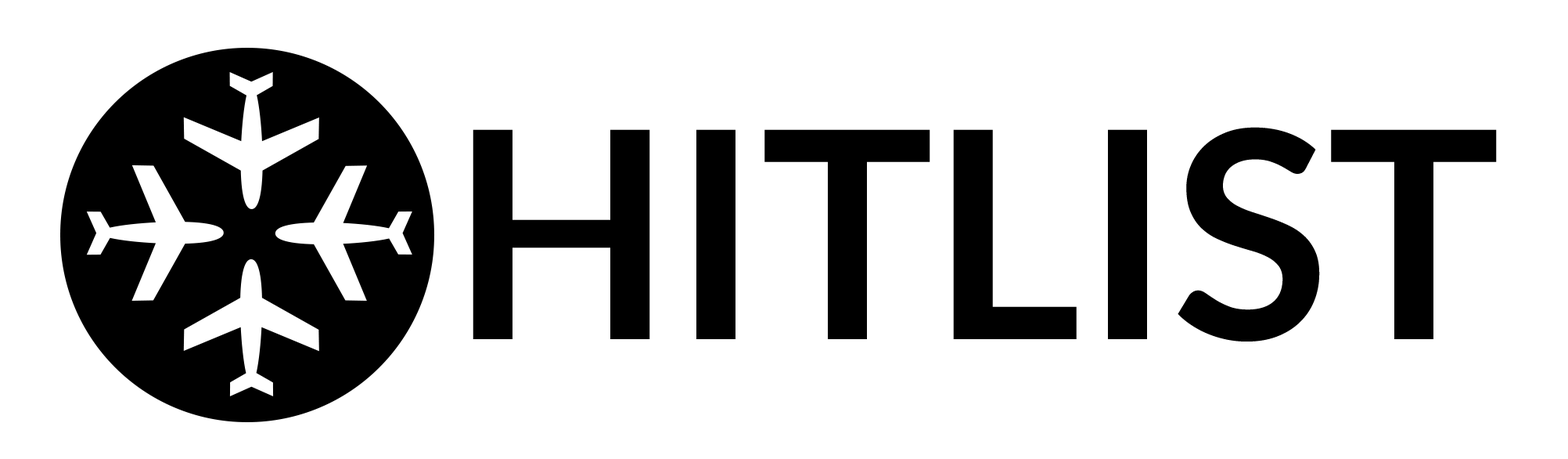
<style>
.page{position:relative;width:1568px;height:459px;background:#ffffff}
.page>*{position:absolute;margin:0}
.t1{font:289.1px "Lato-Bold";color:#000000}
</style>
<div class="page">
<p class="t1" style="left:473px;top:127px;width:1024px;height:214px">HITLIST</p>
</div>
